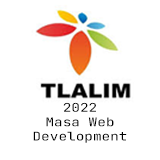
<style>
.page{position:relative;width:160px;height:160px;background:#ffffff}
.page>*{position:absolute;margin:0}
.t1{font:12px "JetBrainsMono-Regular";color:#000000;scale:1.2 1}
</style>
<div class="page">
<p class="t1" style="left:33px;top:102px;width:94px;height:41px;text-align:center">2022<br>Masa Web Development</p>
</div>
